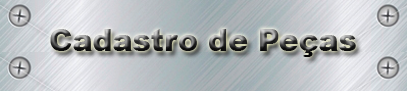
<style>
.page{position:relative;width:407px;height:91px}
.page>*{position:absolute;margin:0}
.t1{font:30px "Arial-Black"}
</style>
<div class="page">
<p class="t1" style="left:50px;top:29px;width:306px;height:28px">Cadastro de Peças</p>
</div>
